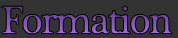
<style>
.page{position:relative;width:178px;height:38px;background:#333333}
.page>*{position:absolute;margin:0}
.t1{font:40px "PlantagenetCherokee";letter-spacing:-0.07em;font-weight:bold}
</style>
<div class="page">
<p class="t1" style="left:1px;top:5px;width:172px;height:30px">Formation</p>
</div>
